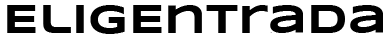
<style>
.page{position:relative;width:392px;height:38px;background:#ffffff}
.page>*{position:absolute;margin:0}
.t1{font:41px "Syncopate-Bold";color:#000000}
</style>
<div class="page">
<p class="t1" style="left:7px;top:5px;width:376px;height:29px">ElIGEntraDa</p>
</div>
